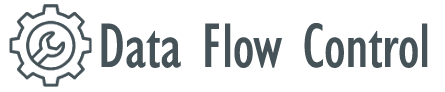
<style>
.page{position:relative;width:445px;height:92px;background:#ffffff}
.page>*{position:absolute;margin:0}
.t1{font:65px "GillSansMT-Condensed";letter-spacing:-0.01em;color:#455359}
</style>
<div class="page">
<p class="t1" style="left:101px;top:23px;width:327px;height:45px">Data Flow Control</p>
</div>
